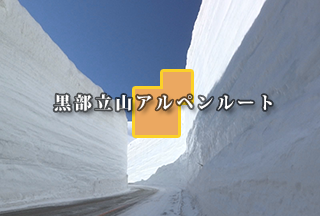
<style>
.page{position:relative;width:320px;height:216px}
.page>*{position:absolute;margin:0}
.t1{font:17px "KozMinPr6N-Heavy";letter-spacing:0.2em;color:#ffffff}
</style>
<div class="page">
<p class="t1" style="left:54px;top:94px;width:218px;height:17px">黒部立山アルペンルート</p>
</div>
